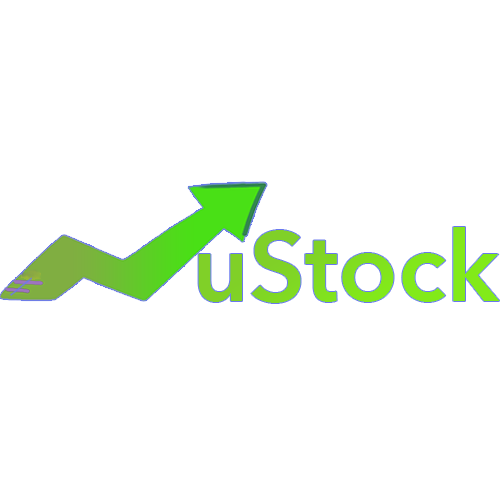
<style>
.page{position:relative;width:500px;height:500px;background:#ffffff}
.page>*{position:absolute;margin:0}
.t1{font:98.3px "AvenirNext-DemiBold";color:#81de20}
</style>
<div class="page">
<p class="t1" style="left:198px;top:227px;width:302px;height:76px">uStock</p>
</div>
